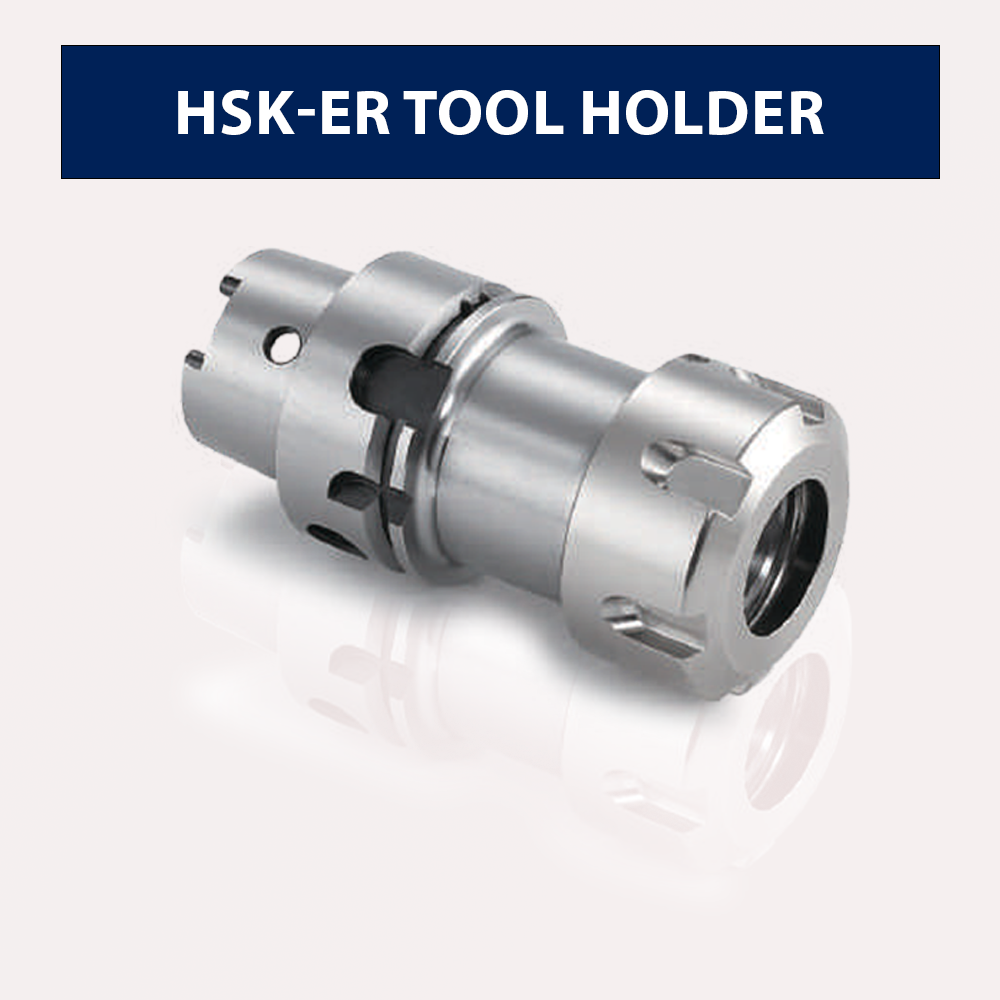
<style>
.page{position:relative;width:1000px;height:1000px;background:#f5efef}
.page>*{position:absolute;margin:0}
.t1{font:64px "MyriadPro-Bold";color:#ffffff;text-transform:uppercase}
</style>
<div class="page">
<p class="t1" style="left:178px;top:90px;width:646px;height:45px">hsk-er tool holder</p>
</div>
